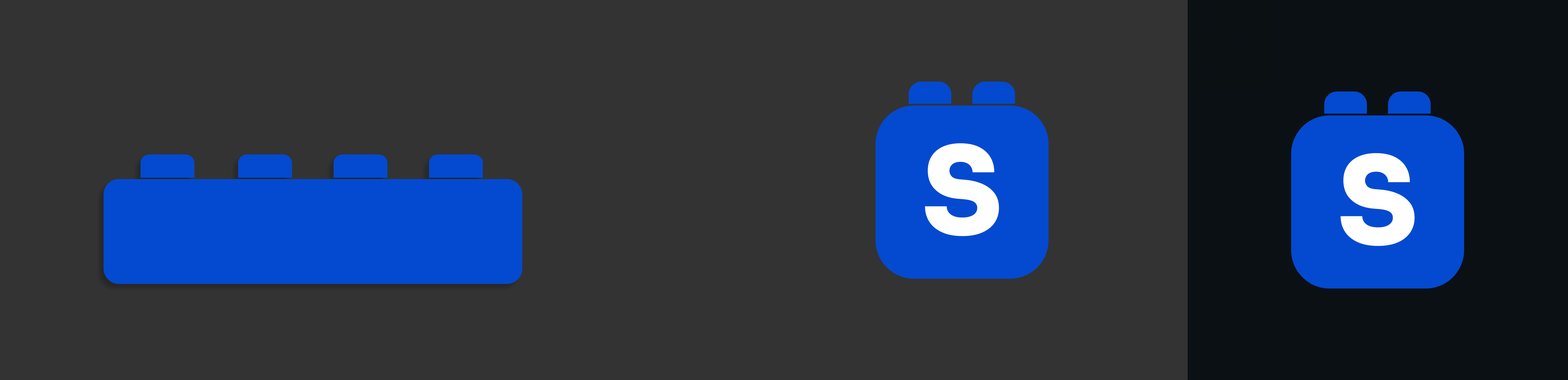
<style>
.page{position:relative;width:1568px;height:380px;background:#333333}
.page>*{position:absolute;margin:0}
.t1{font:120.2px "Sora-ExtraBold";letter-spacing:0.02em;color:#ffffff}
</style>
<div class="page">
<p class="t1" style="left:925px;top:143px;width:74px;height:93px">S</p>
<p class="t1" style="left:1340px;top:153px;width:75px;height:93px">S</p>
</div>
